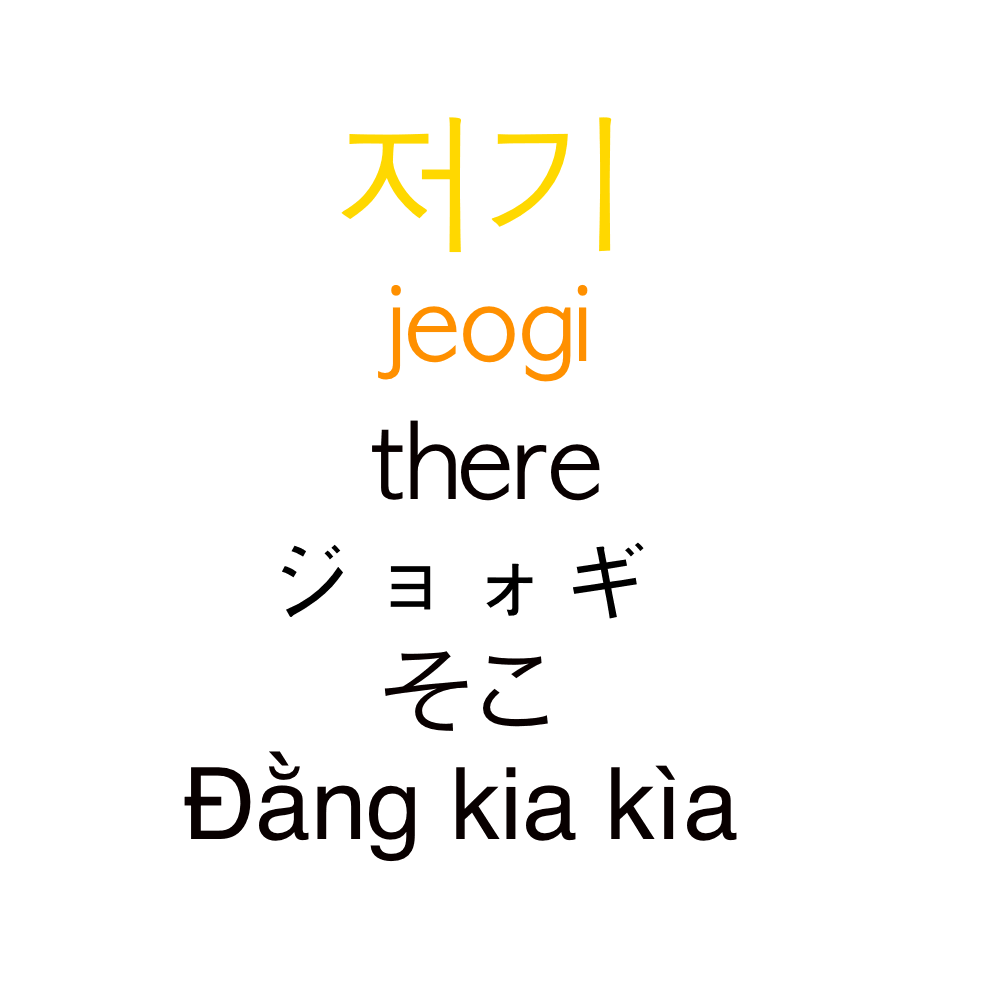
<style>
.page{position:relative;width:1000px;height:1000px;background:#ffffff}
.page>*{position:absolute;margin:0}
.t1{font:150px "AppleGothic";color:#ffd800}
.t2{font:100px "AppleGothic";color:#ff9000}
.t3{font:100px "AppleGothic";color:#080000}
.t4{font:100px "AppleGothic";color:#000000}
.t5{font:100px "HiraKakuProN-W3";color:#080000}
.t6{font:100px "Helvetica";color:#080000}
</style>
<div class="page">
<p class="t1" style="left:341px;top:117px;width:271px;height:136px">저기</p>
<p class="t2" style="left:378px;top:284px;width:210px;height:98px">jeogi</p>
<p class="t3" style="left:372px;top:420px;width:228px;height:81px">there</p>
<p class="t4" style="left:282px;top:542px;width:362px;height:77px">ジョォギ</p>
<p class="t5" style="left:384px;top:651px;width:164px;height:80px">そこ</p>
<p class="t6" style="left:184px;top:751px;width:553px;height:111px">Đằng kia kìa</p>
</div>
